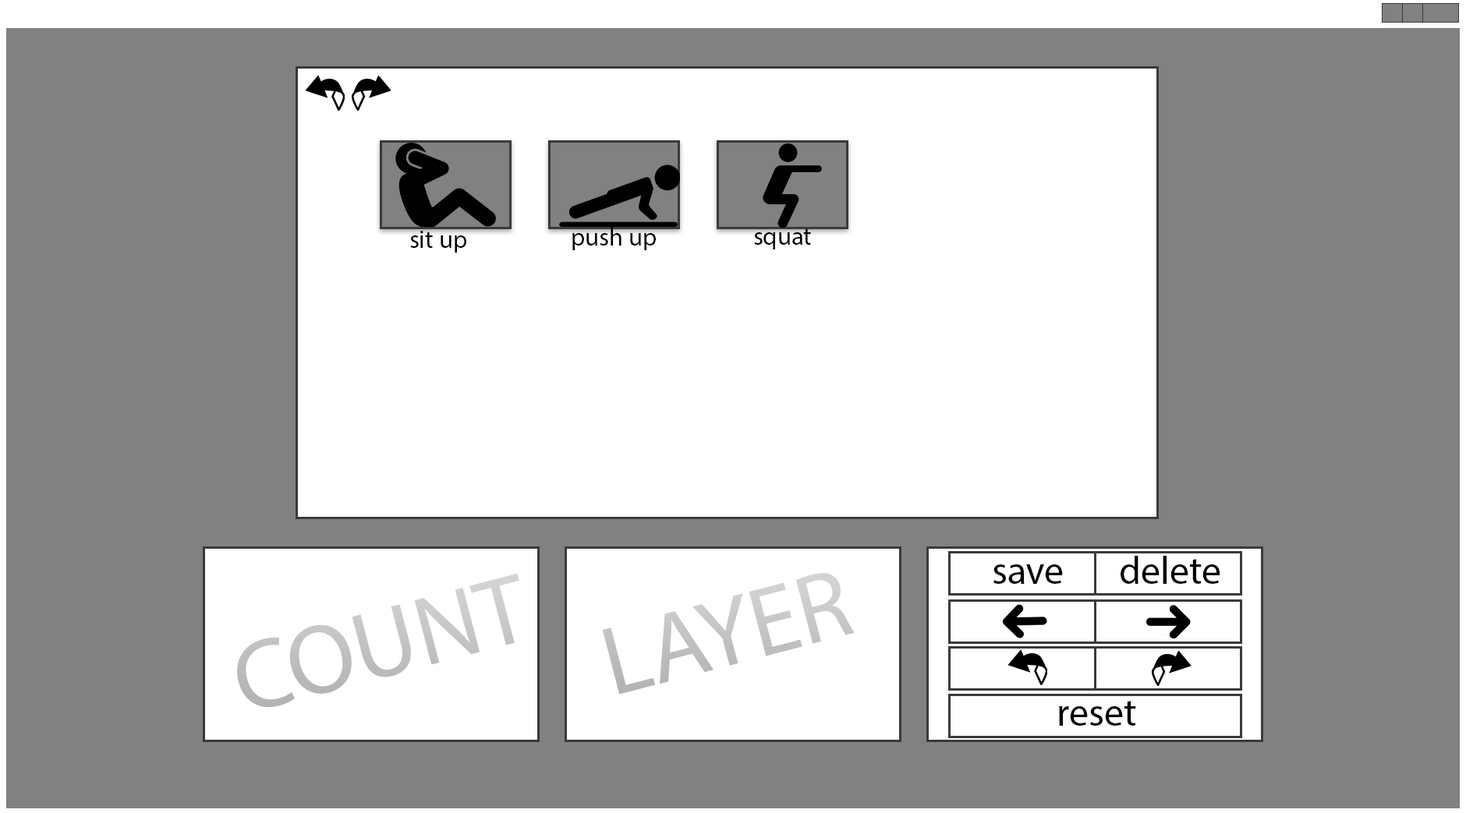
<style>
.page{position:relative;width:1466px;height:813px;background:#818181}
.page>*{position:absolute;margin:0}
.t1{font:25.4px "MyriadPro-Regular";color:#000000}
.t2{font:39px "MyriadPro-Regular";color:#000000}
.t3{font:98.5px "MyriadPro-Regular";color:#c3c3c3}
.t4{font:98.5px "MyriadPro-Regular";color:#c5c5c5}
</style>
<div class="page">
<p class="t1" style="left:410px;top:231px;width:56px;height:22px">sit up</p>
<p class="t1" style="left:572px;top:227px;width:84px;height:23px">push up</p>
<p class="t1" style="left:754px;top:228px;width:57px;height:22px">squat</p>
<p class="t2" style="left:1121px;top:556px;width:99px;height:28px">delete</p>
<p class="t2" style="left:993px;top:565px;width:70px;height:19px">save</p>
<p class="t3" style="left:237px;top:573px;width:282px;height:135px;rotate:-15deg">COUNT</p>
<p class="t4" style="left:602px;top:573px;width:253px;height:122px;rotate:-15deg">LAYER</p>
<p class="t2" style="left:1059px;top:701px;width:77px;height:25px">reset</p>
</div>
